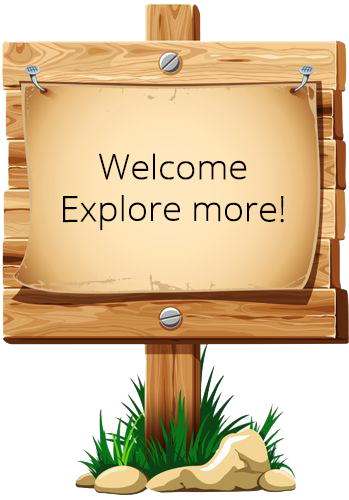
<style>
.page{position:relative;width:349px;height:500px;background:#ffffff}
.page>*{position:absolute;margin:0}
.t1{font:36px "OpenSans-Light";color:#000000}
</style>
<div class="page">
<p class="t1" style="left:63px;top:153px;width:221px;height:78px;text-align:center">Welcome<br>Explore more!</p>
</div>
